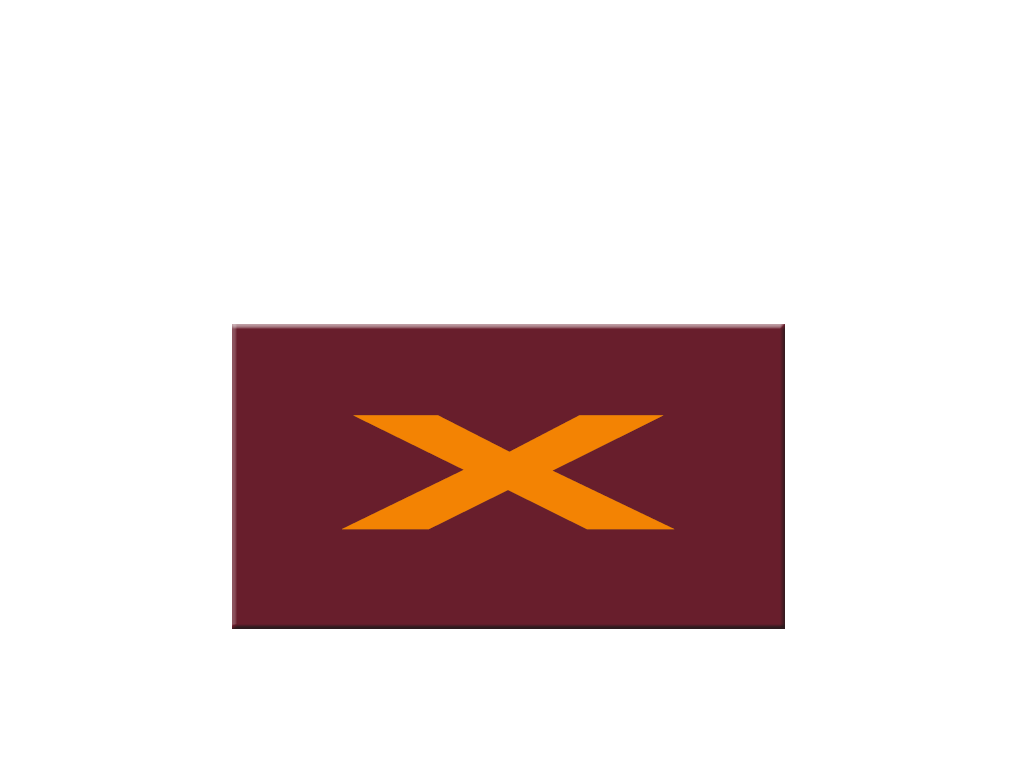
<style>
.page{position:relative;width:1024px;height:764px;background:#ffffff}
.page>*{position:absolute;margin:0}
.t1{font:159px "Arial-BoldMT";color:#ff8a00;text-transform:uppercase;scale:3.14 1}
</style>
<div class="page">
<p class="t1" style="left:342px;top:415px;width:333px;height:115px;opacity:0.9">X</p>
</div>
